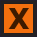
<style>
.page{position:relative;width:37px;height:37px;background:#f36f0e}
.page>*{position:absolute;margin:0}
.t1{font:30px "RussoOne";color:#3d1a00;text-transform:uppercase}
</style>
<div class="page">
<p class="t1" style="left:8px;top:8px;width:22px;height:21px">x</p>
</div>
